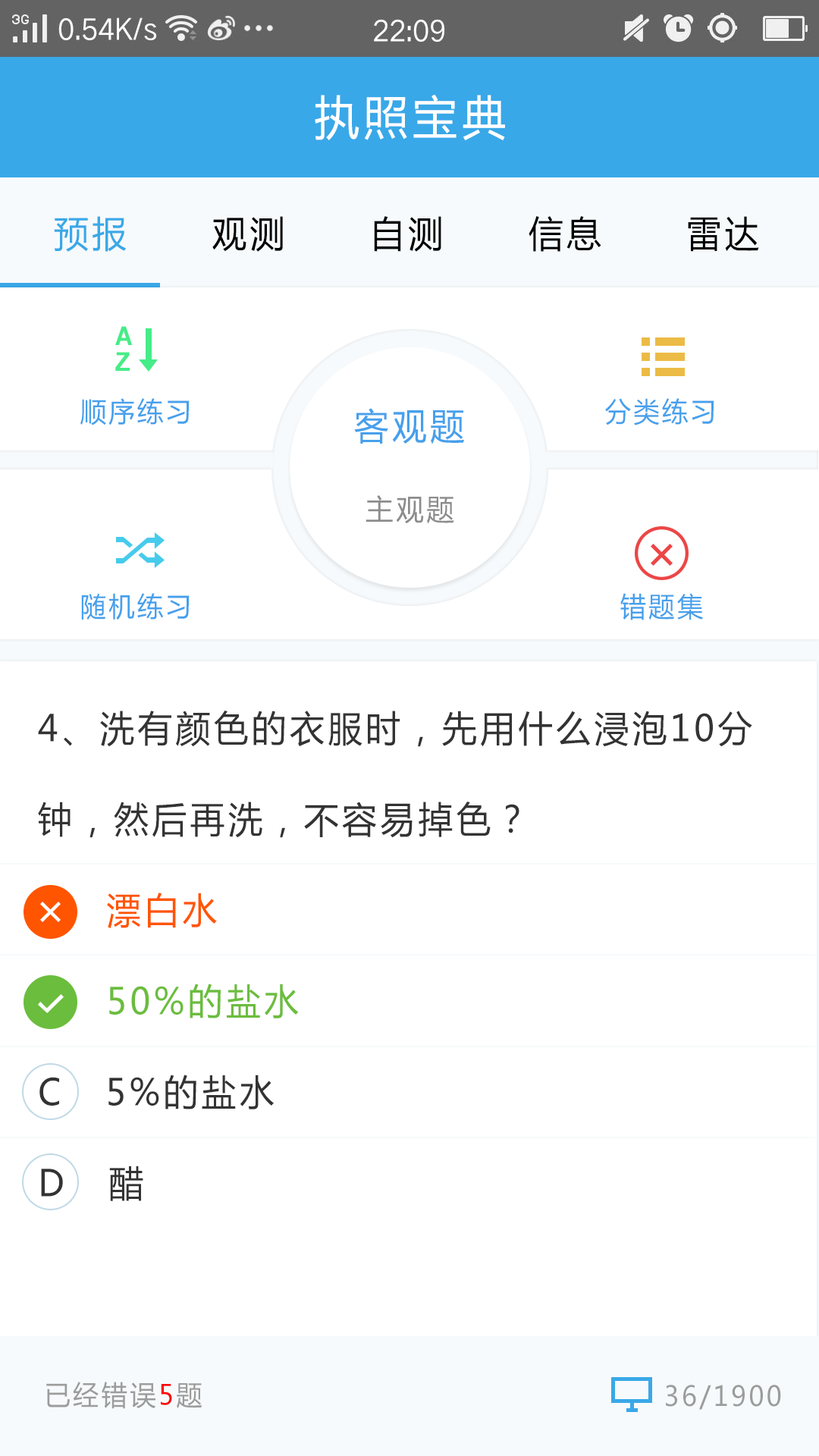
<style>
.page{position:relative;width:819px;height:1456px;background:#ffffff}
.page>*{position:absolute;margin:0}
.t1{font:47px "MicrosoftYaHei";letter-spacing:0.1em;color:#ffffff;scale:0.95 1}
.t2{font:36.4px "MicrosoftYaHei";letter-spacing:0.1em;color:#000000;scale:0.95 1}
.t3{font:36.4px "MicrosoftYaHei";letter-spacing:0.1em;color:#39a8e8;scale:0.95 1}
.t4{font:25.8px/25.8px "Arial-BoldMT";letter-spacing:0.1em;color:#46ec88;scale:0.95 1}
.t5{font:27.3px "MicrosoftYaHei";letter-spacing:0.1em;color:#46a0ec;scale:0.95 1}
.t6{font:36.4px "MicrosoftYaHei";letter-spacing:0.1em;color:#46a0ec;scale:0.95 1}
.t7{font:29.2px "MicrosoftYaHei";letter-spacing:0.1em;color:#8c8c8c;scale:0.95 1}
.t8{font:36.4px/91px "MicrosoftYaHei";letter-spacing:0.1em;color:#333333;scale:0.95 1}
.t9{font:36.4px/91px "MicrosoftYaHei";letter-spacing:0.1em;color:#ff5500;scale:0.95 1}
.t10{font:36.4px/91px "MicrosoftYaHei";letter-spacing:0.1em;color:#6bbd3d;scale:0.95 1}
.t11{font:27.3px "MicrosoftYaHei";letter-spacing:0.1em;color:#9c9c9c;scale:0.95 1}
.t12{font:27.3px "MicrosoftYaHei";letter-spacing:0.1em;color:#ff0000;scale:0.95 1}
</style>
<div class="page">
<p class="t1" style="left:315px;top:94px;width:190px;height:46px">执照宝典</p>
<p class="t2" style="left:54px;top:216px;width:705px;height:36px"><span class="t3">预报</span>      观测      自测      信息      雷达</p>
<p class="t4" style="left:115px;top:326px;width:18px;height:45px">A<br>Z</p>
<p class="t5" style="left:80px;top:398px;width:110px;height:27px">顺序练习</p>
<p class="t5" style="left:605px;top:398px;width:109px;height:27px">分类练习</p>
<p class="t6" style="left:354px;top:408px;width:110px;height:36px">客观题</p>
<p class="t7" style="left:366px;top:495px;width:88px;height:29px">主观题</p>
<p class="t5" style="left:81px;top:593px;width:109px;height:27px">随机练习</p>
<p class="t5" style="left:620px;top:593px;width:83px;height:27px">错题集</p>
<p class="t8" style="left:38px;top:711px;width:714px;height:490px">4、洗有颜色的衣服时，先用什么浸泡10分钟，然后再洗，不容易掉色？<br>     <span class="t9">漂白水   <br>     </span><span class="t10">50%的盐水  </span> <br>C   5%的盐水  <br>D   醋</p>
<p class="t11" style="left:46px;top:1382px;width:156px;height:27px">已经错误<span class="t12">5</span>题</p>
<p class="t11" style="left:666px;top:1385px;width:115px;height:25px">36/1900</p>
</div>
